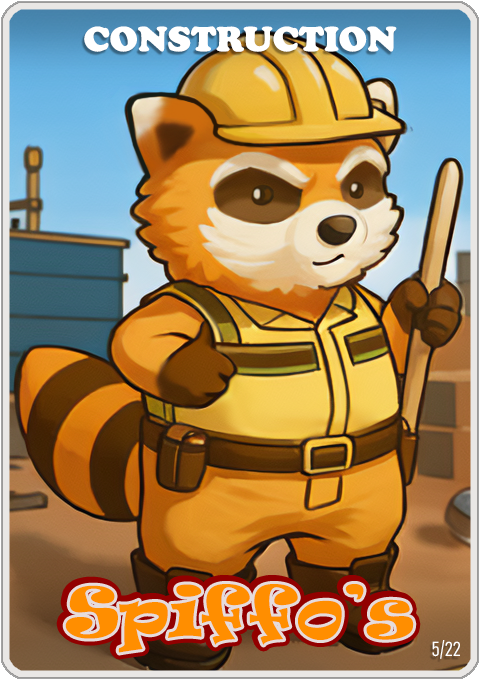
<style>
.page{position:relative;width:480px;height:680px}
.page>*{position:absolute;margin:0}
.t1{font:36px "CooperBlack";color:#ffffff}
.t2{font:65px "Ravie";color:#ff8e00}
.t3{font:20px "Bahnschrift-LightCondensed";color:#ffffff}
</style>
<div class="page">
<p class="t1" style="left:84px;top:26px;width:313px;height:26px">CONSTRUCTION WORKER</p>
<p class="t2" style="left:65px;top:584px;width:349px;height:69px">Spiffo’s</p>
<p class="t3" style="left:432px;top:640px;width:28px;height:19px">5/22</p>
</div>
